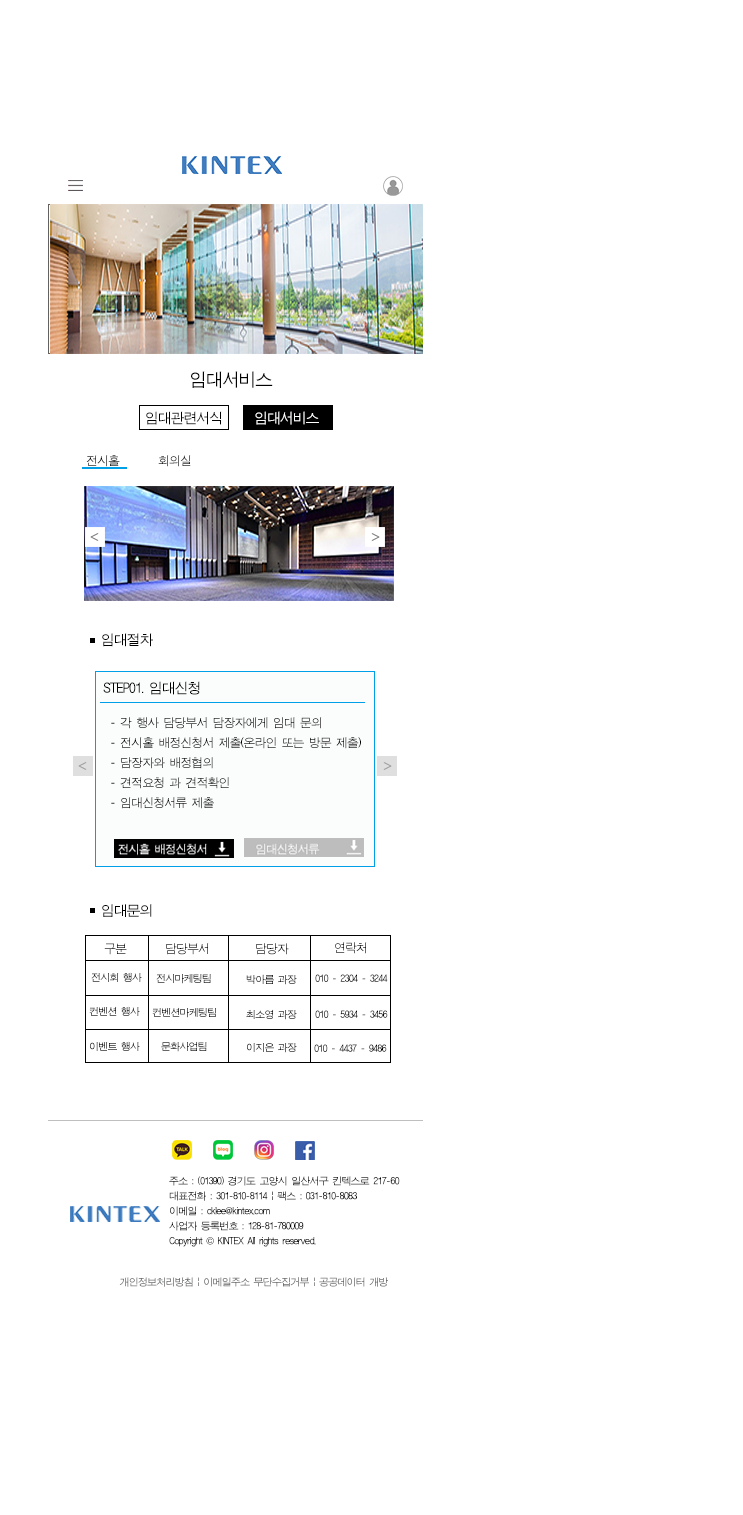
<style>
.page{position:relative;width:743px;height:1515px;background:#ffffff}
.page>*{position:absolute;margin:0}
.t1{font:18px "ÈÞ¸Õ°íµñ";letter-spacing:-0.08em;color:#010101}
.t2{font:14px "ÈÞ¸Õ°íµñ";letter-spacing:-0.08em;color:#020202}
.t3{font:14px "ÈÞ¸Õ°íµñ";letter-spacing:-0.08em;color:#fbfcfc}
.t4{font:12px "ÈÞ¸Õ°íµñ";letter-spacing:-0.08em;color:#000000}
.t5{font:14px "ÈÞ¸Õ°íµñ";letter-spacing:-0.08em;color:#000000}
.t6{font:12px/20px "ÈÞ¸Õ°íµñ";letter-spacing:-0.08em;color:#000000}
.t7{font:12px "ÈÞ¸Õ°íµñ";letter-spacing:-0.08em}
.t8{font:10px "ÈÞ¸Õ°íµñ";letter-spacing:-0.08em}
.t9{font:10px "ÈÞ¸Õ°íµñ";letter-spacing:-0.08em;color:#000000}
.t10{font:10px/15px "ÈÞ¸Õ°íµñ";letter-spacing:-0.08em;color:#020202}
.t11{font:10px/15px "Gulim";letter-spacing:-0.08em;color:#020202}
</style>
<div class="page">
<p class="t1" style="left:191px;top:371px;width:82px;height:17px">임대서비스</p>
<p class="t2" style="left:146px;top:411px;width:76px;height:14px">임대관련서식</p>
<p class="t3" style="left:255px;top:411px;width:64px;height:14px">임대서비스</p>
<p class="t4" style="left:86px;top:455px;width:105px;height:12px">전시홀   회의실</p>
<p class="t5" style="left:102px;top:633px;width:51px;height:14px">임대절차</p>
<p class="t5" style="left:103px;top:681px;width:97px;height:14px">STEP01. 임대신청</p>
<p class="t6" style="left:111px;top:717px;width:250px;height:92px">- 각 행사 담당부서 담장자에게 임대 문의<br>- 전시홀 배정신청서 제출(온라인 또는 방문 제출)<br>- 담장자와 배정협의<br>- 견적요청 과 견적확인<br>- 임대신청서류 제출</p>
<p class="t5" style="left:102px;top:904px;width:50px;height:13px">임대문의</p>
<p class="t4" style="left:335px;top:942px;width:32px;height:12px">연락처</p>
<p class="t7" style="left:104px;top:943px;width:23px;height:12px">구분</p>
<p class="t4" style="left:166px;top:943px;width:43px;height:12px">담당부서</p>
<p class="t4" style="left:256px;top:943px;width:33px;height:12px">담당자</p>
<p class="t8" style="left:91px;top:972px;width:51px;height:10px">전시회 행사</p>
<p class="t8" style="left:156px;top:974px;width:55px;height:10px">전시마케팅팀</p>
<p class="t8" style="left:246px;top:974px;width:51px;height:11px">박아름 과장</p>
<p class="t9" style="left:315px;top:974px;width:73px;height:8px">010 - 2304 - 3244</p>
<p class="t8" style="left:89px;top:1006px;width:51px;height:10px">컨벤션 행사</p>
<p class="t8" style="left:152px;top:1007px;width:64px;height:11px">컨벤션마케팅팀</p>
<p class="t8" style="left:246px;top:1009px;width:51px;height:11px">최소영 과장</p>
<p class="t9" style="left:315px;top:1010px;width:73px;height:8px">010 - 5934 - 3456</p>
<p class="t8" style="left:90px;top:1041px;width:50px;height:10px">이벤트 행사</p>
<p class="t8" style="left:161px;top:1041px;width:46px;height:11px">문화사업팀</p>
<p class="t8" style="left:247px;top:1042px;width:50px;height:11px">이지은 과장</p>
<p class="t9" style="left:314px;top:1044px;width:73px;height:8px">010 - 4437 - 9486</p>
<p class="t10" style="left:169px;top:1176px;width:231px;height:71px">주소 : (01390) 경기도 고양시 일산서구 킨텍스로 217-60<br>대표전화 : 301-810-8114 | 팩스 : 031-810-8083<br>이메일 : cklee@kintex.com <br>사업자 등록번호 : 128-81-780009<br>Copyright <span class="t11">©</span> KINTEX All rights reserved.</p>
<p class="t8" style="left:119px;top:1277px;width:269px;height:10px">개인정보처리방침 | 이메일주소 무단수집거부 | 공공데이터 개방</p>
</div>
